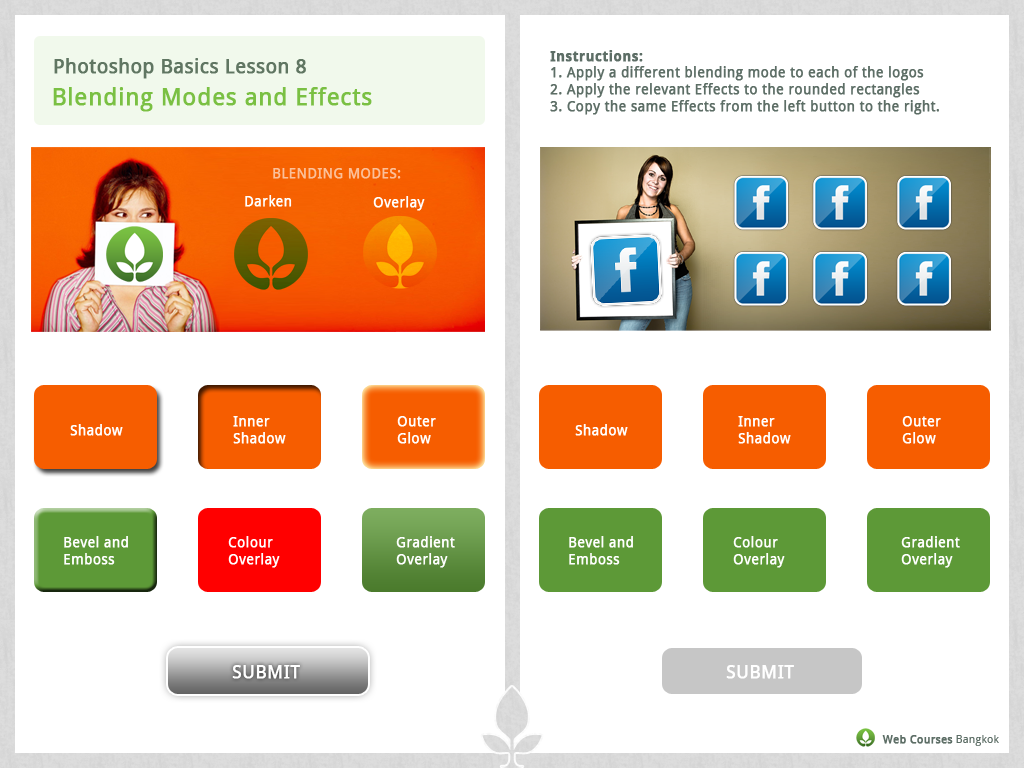
<style>
.page{position:relative;width:1024px;height:768px;background:#ffffff}
.page>*{position:absolute;margin:0}
.t1{font:14px "DroidSans";letter-spacing:0.01em;color:#5d6e66;font-weight:bold}
.t2{font:14px "DroidSans-Bold";letter-spacing:0.01em;color:#5d6e66;font-weight:bold}
.t3{font:19.6px "DroidSans";letter-spacing:0.01em;color:#5d6e66;font-weight:bold}
.t4{font:24px "DroidSans";letter-spacing:0.01em;color:#7ac043;font-weight:bold}
.t5{font:14px "DroidSans";letter-spacing:0.01em;color:#fbc099;font-weight:bold}
.t6{font:14px "DroidSans";letter-spacing:0.01em;color:#ffffff;font-weight:bold}
.t7{font:18px "DroidSans";letter-spacing:0.01em;color:#ffffff;font-weight:bold}
.t8{font:11.1px "DroidSans";letter-spacing:0.01em;color:#5d6e66;font-weight:bold}
.t9{font:11.1px "DroidSans";letter-spacing:0.01em;color:#5d6e66}
</style>
<div class="page">
<p class="t1" style="left:550px;top:50px;width:389px;height:65px"><span class="t2">Instructions:<br></span>1. Apply a different blending mode to each of the logos<br>2. Apply the relevant Effects to the rounded rectangles<br>3. Copy the same Effects from the left button to the right.</p>
<p class="t3" style="left:54px;top:58px;width:252px;height:21px">Photoshop Basics Lesson 8</p>
<p class="t4" style="left:53px;top:87px;width:319px;height:25px">Blending Modes and Effects</p>
<p class="t5" style="left:273px;top:168px;width:128px;height:11px">BLENDING MODES:</p>
<p class="t6" style="left:245px;top:195px;width:47px;height:12px">Darken</p>
<p class="t6" style="left:373px;top:196px;width:52px;height:15px">Overlay</p>
<p class="t6" style="left:70px;top:424px;width:53px;height:12px">Shadow</p>
<p class="t6" style="left:233px;top:416px;width:53px;height:28px">Inner<br>Shadow</p>
<p class="t6" style="left:397px;top:416px;width:39px;height:28px">Outer <br>Glow</p>
<p class="t6" style="left:575px;top:424px;width:53px;height:12px">Shadow</p>
<p class="t6" style="left:738px;top:416px;width:53px;height:28px">Inner<br>Shadow</p>
<p class="t6" style="left:902px;top:416px;width:39px;height:28px">Outer <br>Glow</p>
<p class="t6" style="left:64px;top:536px;width:64px;height:29px">Bevel and<br>Emboss</p>
<p class="t6" style="left:228px;top:536px;width:52px;height:32px">Colour<br>Overlay</p>
<p class="t6" style="left:396px;top:536px;width:59px;height:32px">Gradient<br>Overlay</p>
<p class="t6" style="left:569px;top:536px;width:64px;height:29px">Bevel and<br>Emboss</p>
<p class="t6" style="left:733px;top:536px;width:52px;height:32px">Colour<br>Overlay</p>
<p class="t6" style="left:901px;top:536px;width:59px;height:32px">Gradient<br>Overlay</p>
<p class="t7" style="left:232px;top:665px;width:68px;height:14px">SUBMIT</p>
<p class="t7" style="left:726px;top:665px;width:68px;height:14px">SUBMIT</p>
<p class="t8" style="left:882px;top:735px;width:117px;height:11px">Web Courses<span class="t9"> Bangkok</span></p>
</div>
